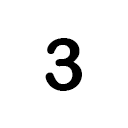
<style>
.page{position:relative;width:128px;height:128px;background:#ffffff}
.page>*{position:absolute;margin:0}
.t1{font:73px "ArialRoundedMTBold";letter-spacing:0.4em;color:#000000}
</style>
<div class="page">
<p class="t1" style="left:45px;top:38px;width:37px;height:53px">3</p>
</div>
